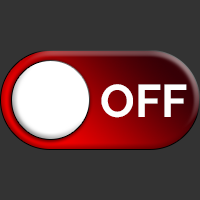
<style>
.page{position:relative;width:200px;height:200px;background:#333333}
.page>*{position:absolute;margin:0}
.t1{font:45.8px "Raleway-Bold";color:#fefefe;text-transform:uppercase}
</style>
<div class="page">
<p class="t1" style="left:101px;top:84px;width:86px;height:34px">OFF</p>
</div>
